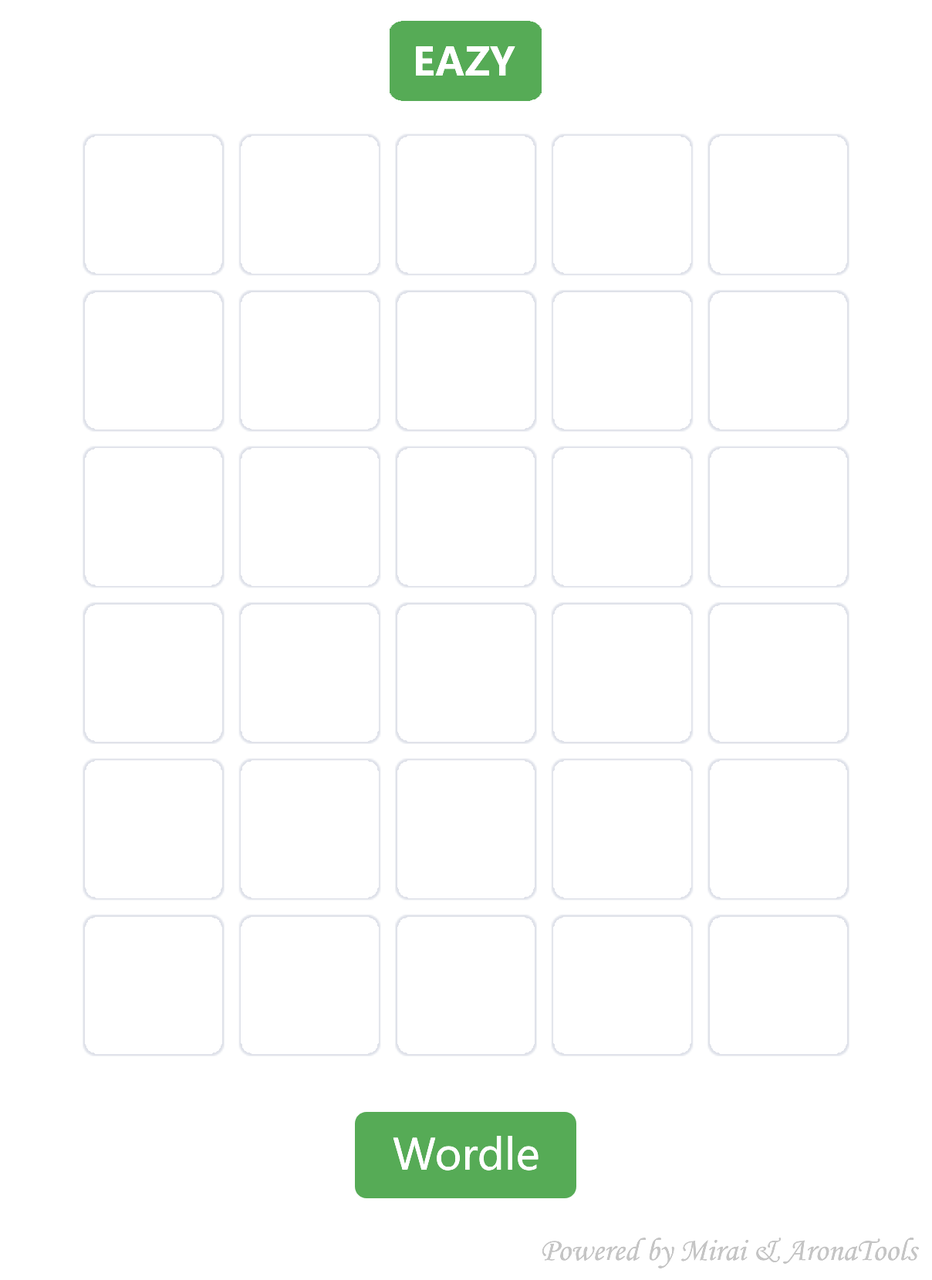
<style>
.page{position:relative;width:932px;height:1280px;background:#ffffff}
.page>*{position:absolute;margin:0}
.t1{font:38.6px "MicrosoftYaHeiUI-Bold";color:#ffffff}
.t2{font:38.6px "MicrosoftYaHeiUI-Bold";color:#aba856}
.t3{font:42.4px "MicrosoftYaHeiUI";color:#ffffff}
.t4{font:32.4px "MonotypeCorsiva";color:#afafaf}
.t5{font:32.4px "MonotypeCorsiva";color:#c5c5c5}
</style>
<div class="page">
<p class="t1" style="left:416px;top:46px;width:99px;height:30px"><span class="t2">E</span>AZY</p>
<p class="t3" style="left:393px;top:1136px;width:145px;height:35px">Wordle</p>
<p class="t4" style="left:542px;top:1238px;width:376px;height:31px">Powered by <span class="t5">Mirai &amp; </span>AronaTools</p>
</div>
